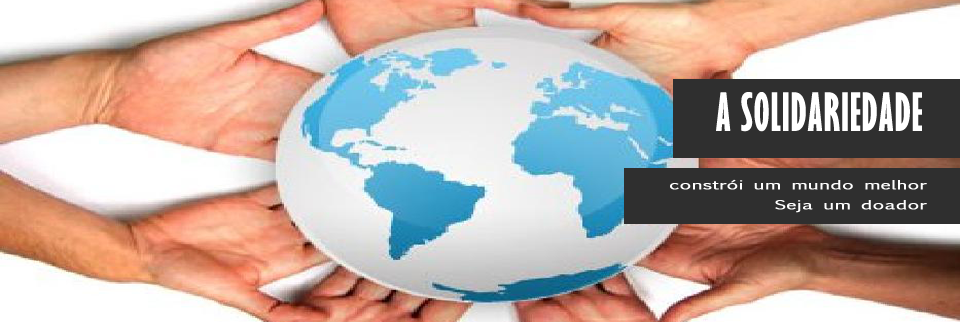
<style>
.page{position:relative;width:960px;height:322px}
.page>*{position:absolute;margin:0}
.t1{font:48px "GillSansMT-ExtraCondensedBold";color:#ffffff;text-transform:uppercase;font-weight:bold}
.t2{font:12px/20px "EuphemiaCAS";color:#ffffff;font-weight:bold;scale:1.57 1}
</style>
<div class="page">
<p class="t1" style="left:716px;top:92px;width:206px;height:40px">A solidariedade</p>
<p class="t2" style="left:670px;top:179px;width:257px;height:34px;text-align:right">constrói um mundo melhor<br>Seja um doador</p>
</div>
